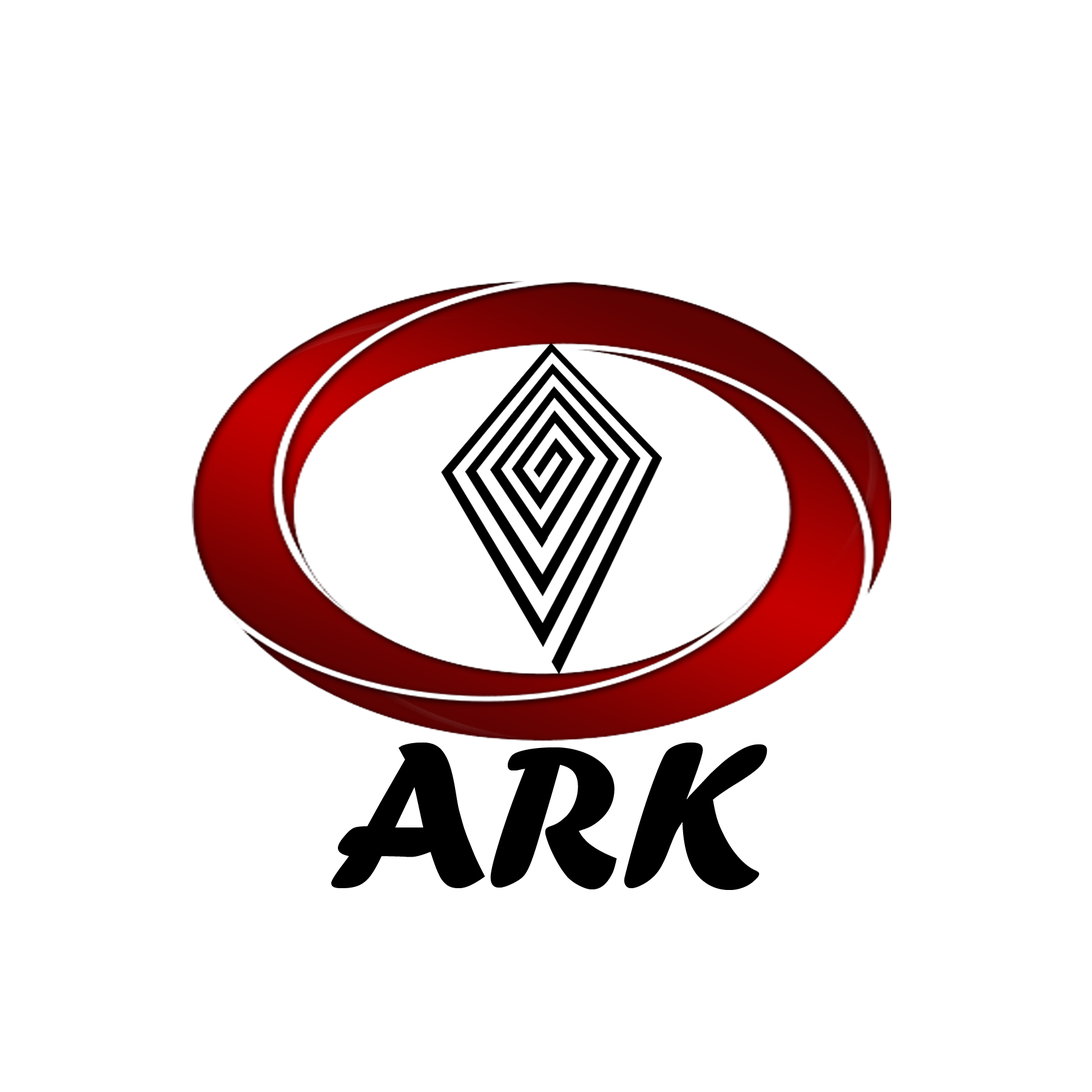
<style>
.page{position:relative;width:1092px;height:1092px;background:#ffffff}
.page>*{position:absolute;margin:0}
.t1{font:216px "ForteMT";color:#000000}
</style>
<div class="page">
<p class="t1" style="left:331px;top:742px;width:436px;height:148px">ARK</p>
</div>
